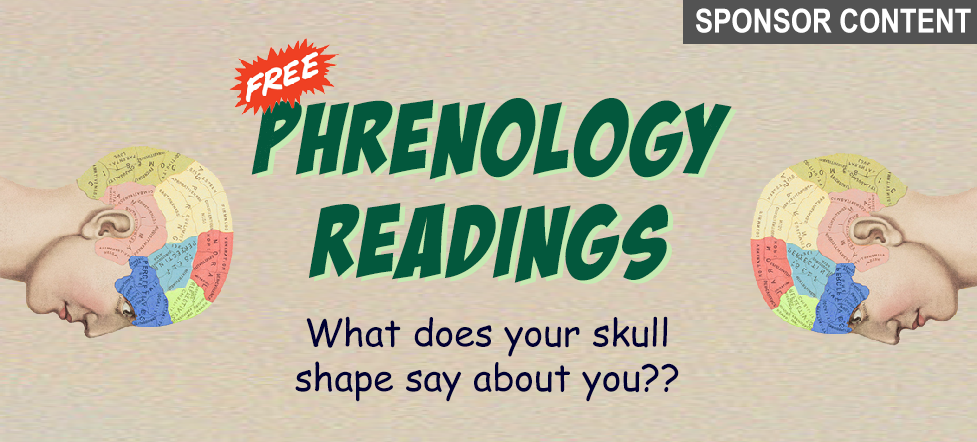
<style>
.page{position:relative;width:977px;height:442px}
.page>*{position:absolute;margin:0}
.t1{font:33.3px "ArialNarrow-Bold";color:#ffffff}
.t2{font:103.3px/103.3px "BadaBoomBB";color:#03583d}
.t3{font:103.3px/103.3px "BadaBoomBB"}
.t4{font:37.4px "ComicSansMS";color:#000033}
</style>
<div class="page">
<p class="t1" style="left:696px;top:8px;width:275px;height:25px">SPONSOR CONTENT</p>
<p class="t2" style="left:251px;top:98px;width:481px;height:185px;text-align:center">PhrenologY Readings</p>
<p class="t3" style="left:257px;top:101px;width:480px;height:186px;text-align:center">PhrenologY Readings</p>
<p class="t4" style="left:295px;top:316px;width:384px;height:86px;text-align:center">What does your skull shape say about you??</p>
</div>
